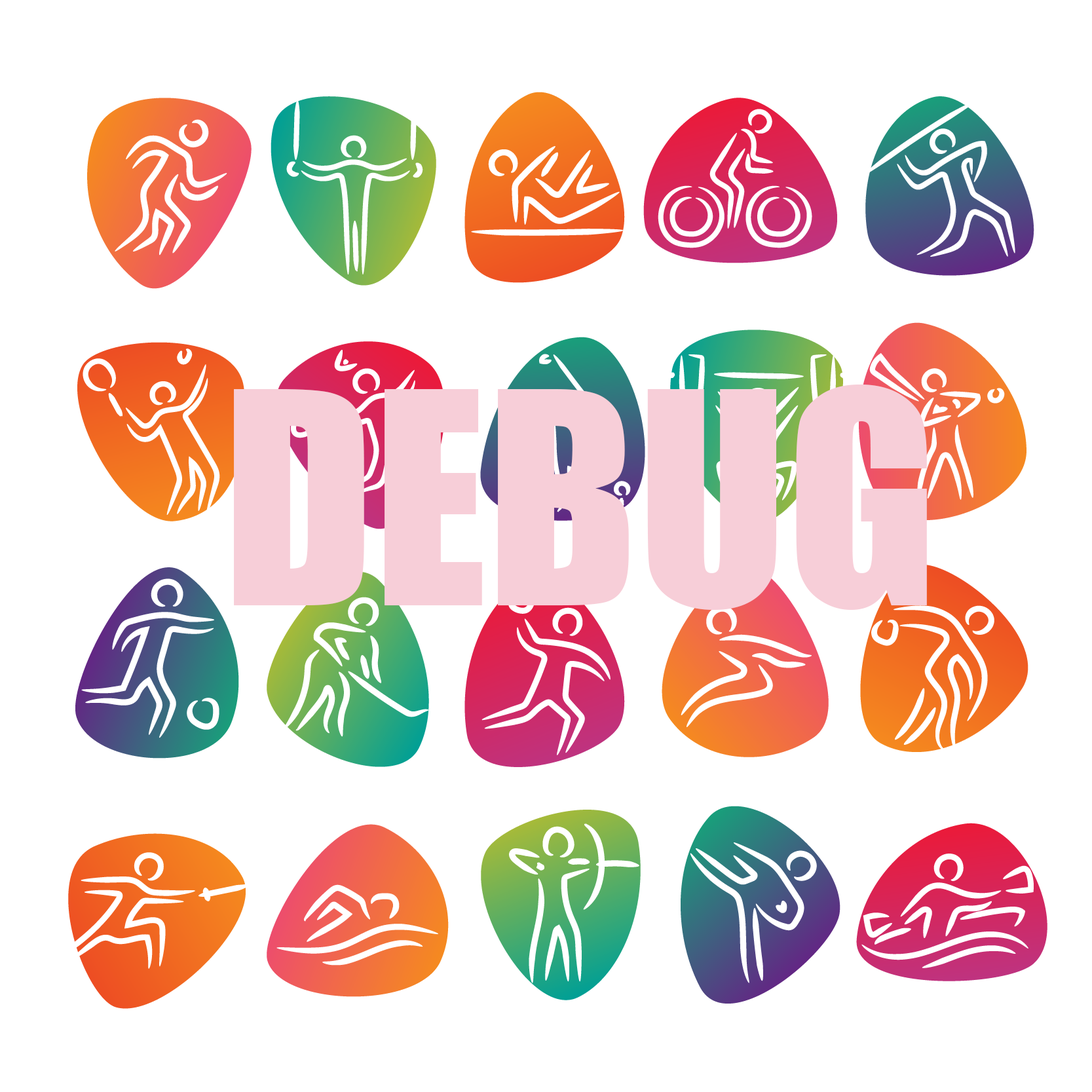
<style>
.page{position:relative;width:1092px;height:1092px;background:#ffffff}
.page>*{position:absolute;margin:0}
.t1{font:272.9px "Impact";color:#f7ced8}
</style>
<div class="page">
<p class="t1" style="left:234px;top:385px;width:693px;height:225px">DEBUG</p>
</div>
